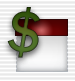
<style>
.page{position:relative;width:75px;height:81px}
.page>*{position:absolute;margin:0}
.t1{font:62.9px "FranklinGothic-MediumItalic";color:#465d1d}
</style>
<div class="page">
<p class="t1" style="left:7px;top:7px;width:34px;height:51px">$</p>
</div>
